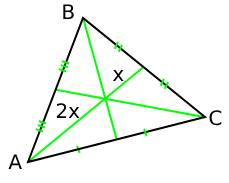
<style>
.page{position:relative;width:229px;height:183px;background:#ffffff}
.page>*{position:absolute;margin:0}
.t1{font:20px "DejaVuSans";color:#000000}
</style>
<div class="page">
<p class="t1" style="left:63px;top:4px;width:11px;height:15px">B</p>
<p class="t1" style="left:112px;top:70px;width:12px;height:11px">x</p>
<p class="t1" style="left:56px;top:103px;width:24px;height:15px">2x</p>
<p class="t1" style="left:209px;top:110px;width:13px;height:16px">C</p>
<p class="t1" style="left:8px;top:154px;width:14px;height:15px">A</p>
</div>
